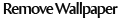
<style>
.page{position:relative;width:122px;height:20px;background:#ffffff}
.page>*{position:absolute;margin:0}
.t1{font:12px "AmiraParadiso";letter-spacing:-0.06em;color:#000000}
</style>
<div class="page">
<p class="t1" style="left:3px;top:2px;width:115px;height:16px;opacity:0.96">Remove Wallpaper</p>
</div>
